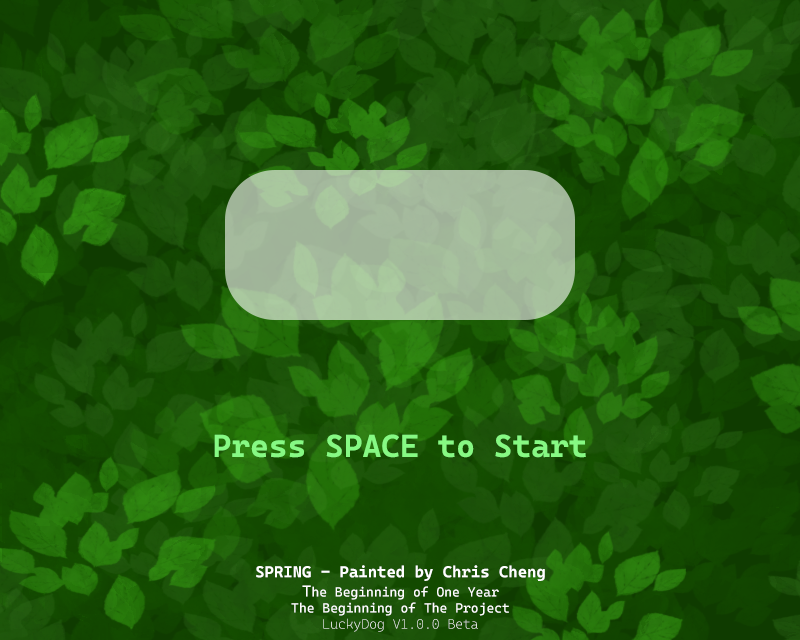
<style>
.page{position:relative;width:800px;height:640px}
.page>*{position:absolute;margin:0}
.t1{font:32px "CascadiaMonoRoman-Bold";color:#86f983}
.t2{font:13.3px "CascadiaMono-Roman";color:#ffffff}
.t3{font:16px "CascadiaMonoRoman-Bold";color:#ffffff}
.t4{font:16px "CascadiaMono-Roman";color:#ffffff}
.t5{font:13.3px "CascadiaMonoRoman-ExtraLight";color:#ffffff}
</style>
<div class="page">
<p class="t1" style="left:214px;top:434px;width:372px;height:24px">Press SPACE to Start</p>
<p class="t2" style="left:256px;top:565px;width:289px;height:67px;text-align:center"><span class="t3">SPRING - Painted by Chris Cheng<br></span><span class="t4">T</span>he Beginning of One Year<br>The Beginning of The Project<br><span class="t5">LuckyDog V1.0.0 Beta</span></p>
</div>
